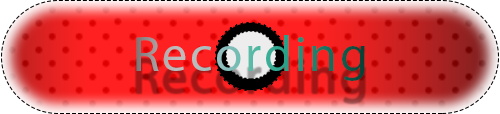
<style>
.page{position:relative;width:500px;height:114px}
.page>*{position:absolute;margin:0}
.t1{font:50px "MyriadPro-Regular";letter-spacing:0.055em}
</style>
<div class="page">
<p class="t1" style="left:136px;top:35px;width:229px;height:46px">Recording</p>
</div>
